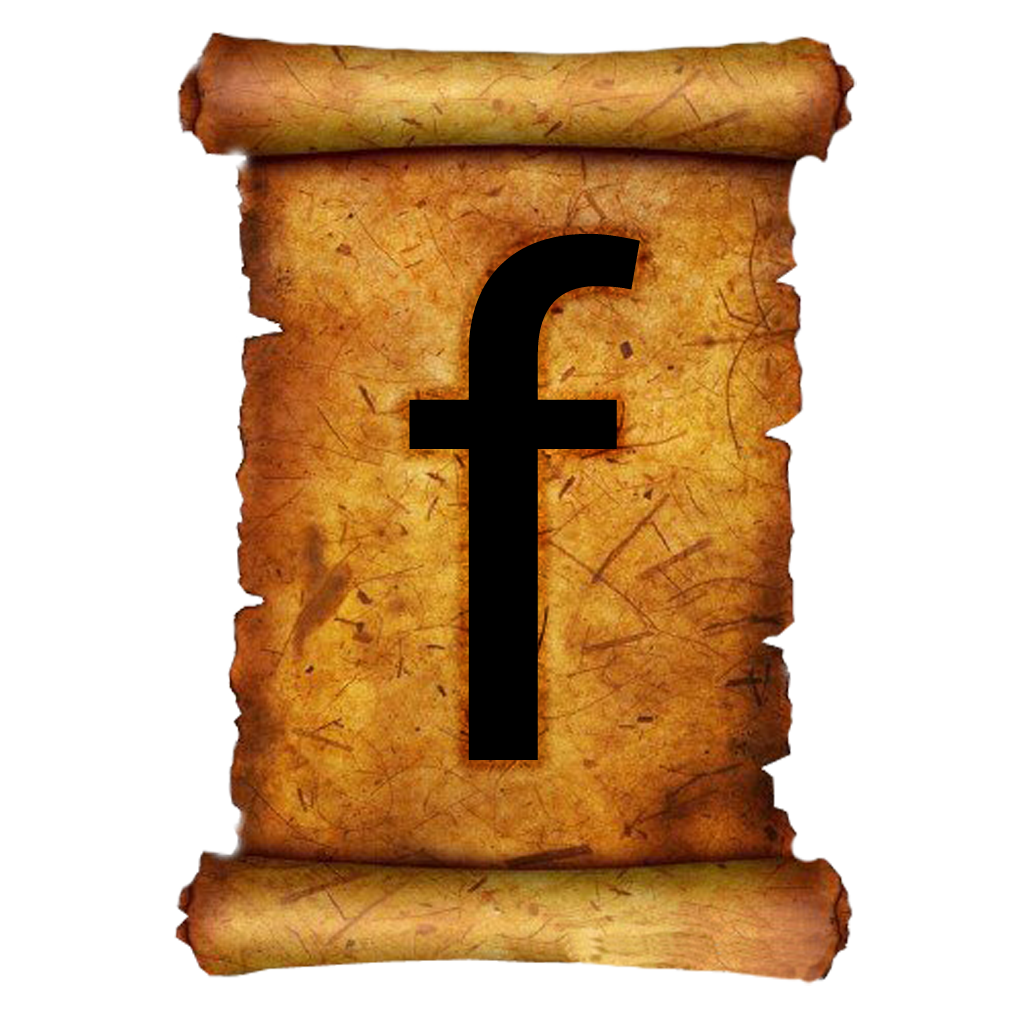
<style>
.page{position:relative;width:1024px;height:1024px;background:#ffffff}
.page>*{position:absolute;margin:0}
.t1{font:681px "Roboto-Regular";letter-spacing:0.025em;color:#000000;scale:1.05 1}
</style>
<div class="page">
<p class="t1" style="left:409px;top:233px;width:231px;height:527px">f</p>
</div>
